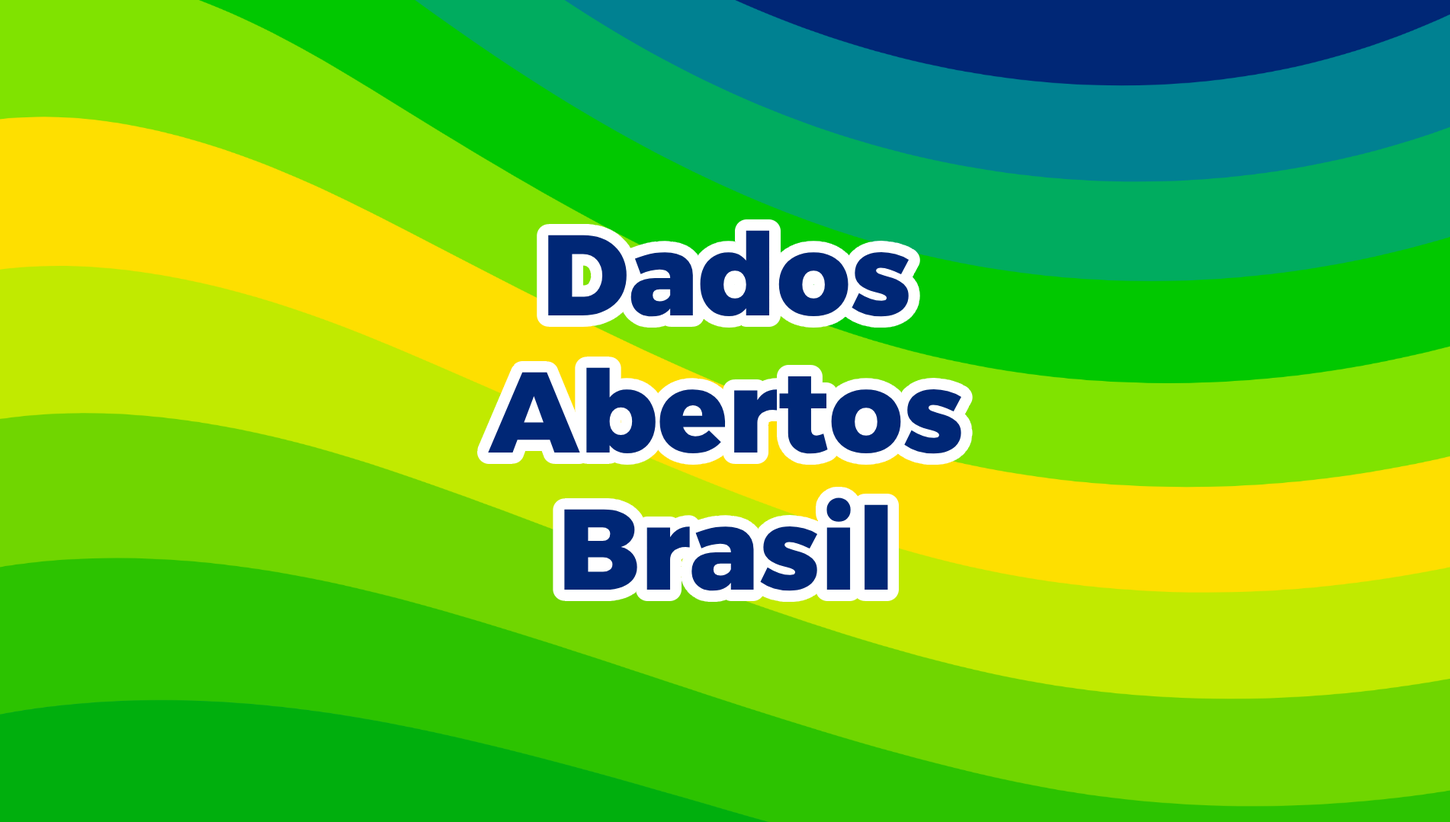
<style>
.page{position:relative;width:1450px;height:822px}
.page>*{position:absolute;margin:0}
.t1{font:114.3px "Alexandria-ExtraBold";color:#002776}
</style>
<div class="page">
<p class="t1" style="left:488px;top:230px;width:473px;height:362px;text-align:center">Dados<br>Abertos<br>Brasil</p>
</div>
